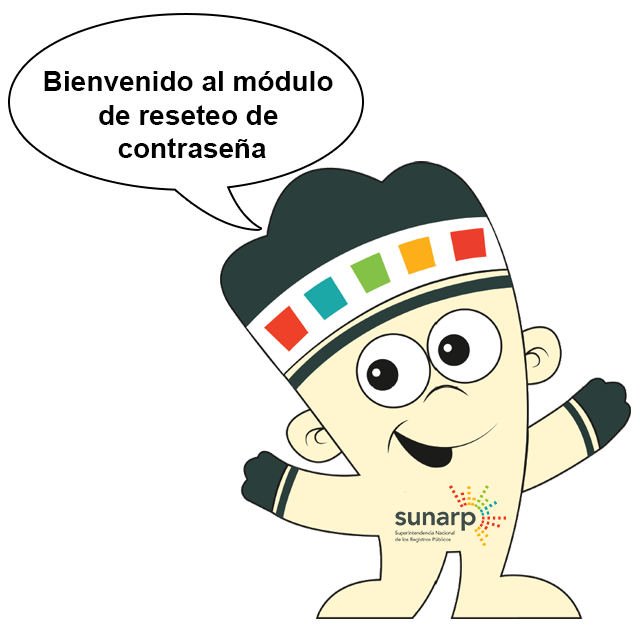
<style>
.page{position:relative;width:640px;height:634px;background:#ffffff}
.page>*{position:absolute;margin:0}
.t1{font:28px "Arial-BoldMT";color:#000000}
</style>
<div class="page">
<p class="t1" style="left:44px;top:71px;width:289px;height:87px;text-align:center">Bienvenido al módulo <br>de reseteo de <br>contraseña</p>
</div>
